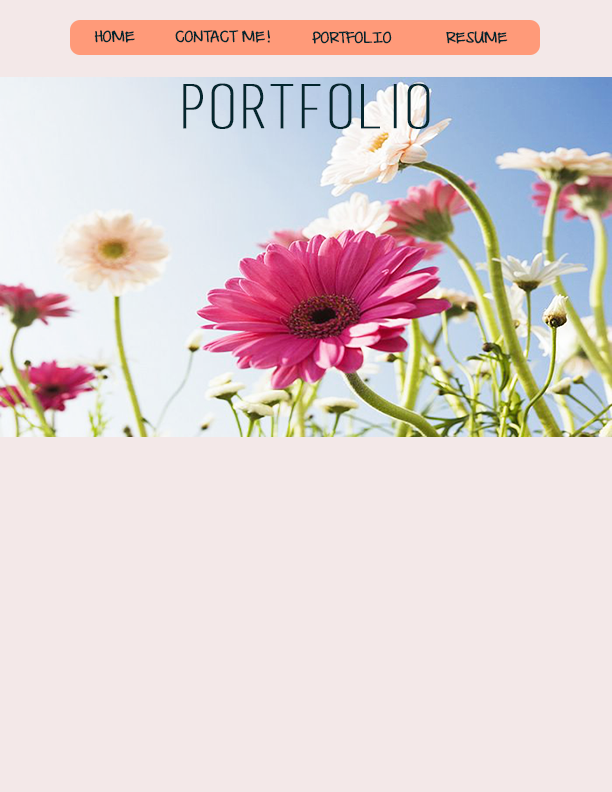
<style>
.page{position:relative;width:612px;height:792px;background:#f3e8e8}
.page>*{position:absolute;margin:0}
.t1{font:14px "DJBILoveMeSomeAly";color:#04262e;text-transform:uppercase;font-weight:bold}
.t2{font:60px "basictitlefont";color:#04262e;text-transform:uppercase;font-weight:bold}
</style>
<div class="page">
<p class="t1" style="left:94px;top:30px;width:41px;height:13px">home</p>
<p class="t1" style="left:175px;top:30px;width:95px;height:13px">contact me!</p>
<p class="t1" style="left:312px;top:31px;width:80px;height:13px">portfolio</p>
<p class="t1" style="left:446px;top:31px;width:62px;height:13px">resume</p>
<p class="t2" style="left:183px;top:83px;width:247px;height:46px">portfolio</p>
</div>
